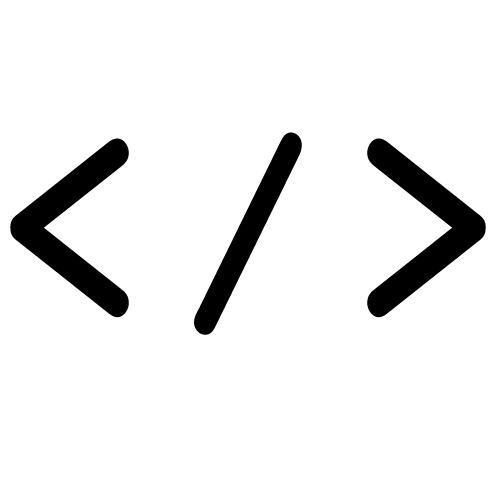
<style>
.page{position:relative;width:500px;height:500px;background:#ffffff}
.page>*{position:absolute;margin:0}
.t1{font:259.6px "OCRAStd";letter-spacing:0.1em;color:#000000;scale:0.84 1}
</style>
<div class="page">
<p class="t1" style="left:10px;top:132px;width:476px;height:203px">&lt;/&gt;</p>
</div>
